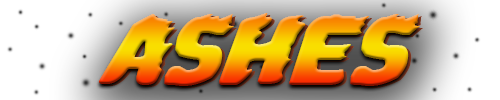
<style>
.page{position:relative;width:500px;height:100px}
.page>*{position:absolute;margin:0}
.t1{font:99px "JohnnyTorchExpandedItalic"}
</style>
<div class="page">
<p class="t1" style="left:98px;top:13px;width:322px;height:73px">ashes</p>
<p class="t1" style="left:101px;top:15px;width:322px;height:73px">ashes</p>
</div>
